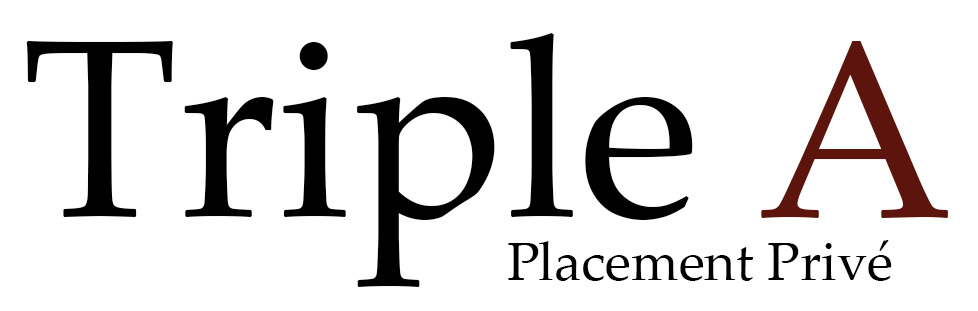
<style>
.page{position:relative;width:978px;height:311px;background:#ffffff}
.page>*{position:absolute;margin:0}
.t1{font:253.1px "PalatinoLinotype-Roman";color:#000000}
.t2{font:253px "PalatinoLinotype-Roman";color:#5d140d}
.t3{font:54px "PalatinoLinotype-Roman";color:#000000}
</style>
<div class="page">
<p class="t1" style="left:26px;top:33px;width:667px;height:254px">Triple</p>
<p class="t2" style="left:761px;top:41px;width:187px;height:177px">A</p>
<p class="t3" style="left:508px;top:240px;width:384px;height:41px">Placement Privé</p>
</div>
